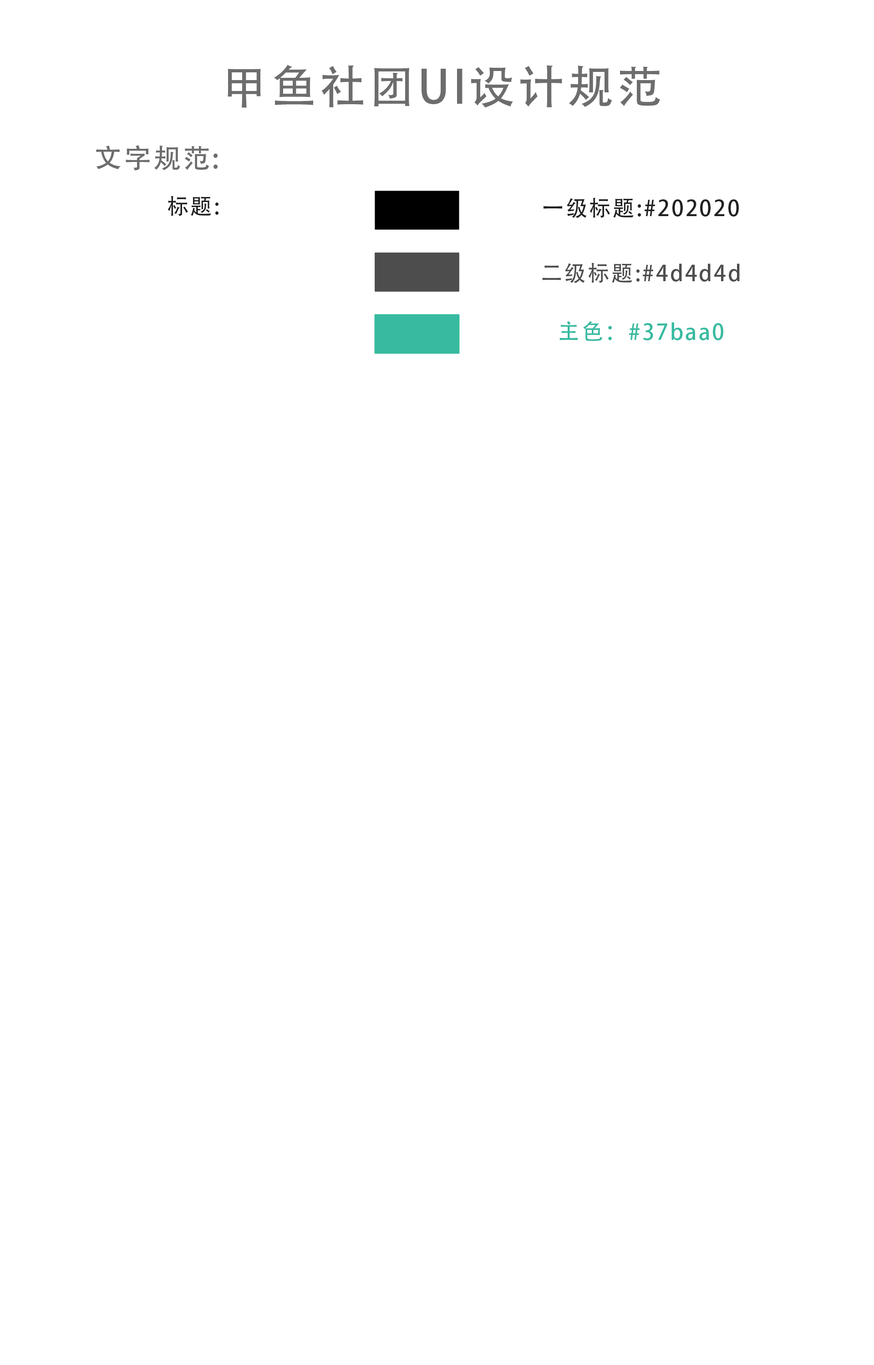
<style>
.page{position:relative;width:874px;height:1365px;background:#ffffff}
.page>*{position:absolute;margin:0}
.t1{font:45.5px "AdobeHeitiStd-Regular";letter-spacing:0.08em;color:#6d6d6d}
.t2{font:21.8px "AdobeHeitiStd-Regular";letter-spacing:0.08em;color:#202020}
.t3{font:21.8px "AdobeHeitiStd-Regular";letter-spacing:0.08em;color:#4d4d4d}
.t4{font:21.8px "AdobeHeitiStd-Regular";letter-spacing:0.08em;color:#37baa0}
</style>
<div class="page">
<p class="t1" style="left:227px;top:65px;width:433px;height:43px">甲鱼社团UI设计规范</p>
<p class="t2" style="left:167px;top:196px;width:51px;height:20px">标题:</p>
<p class="t2" style="left:543px;top:197px;width:195px;height:21px">一级标题:#202020</p>
<p class="t3" style="left:542px;top:263px;width:197px;height:20px">二级标题:#4d4d4d</p>
<p class="t4" style="left:559px;top:321px;width:164px;height:20px">主色：#37baa0</p>
</div>
